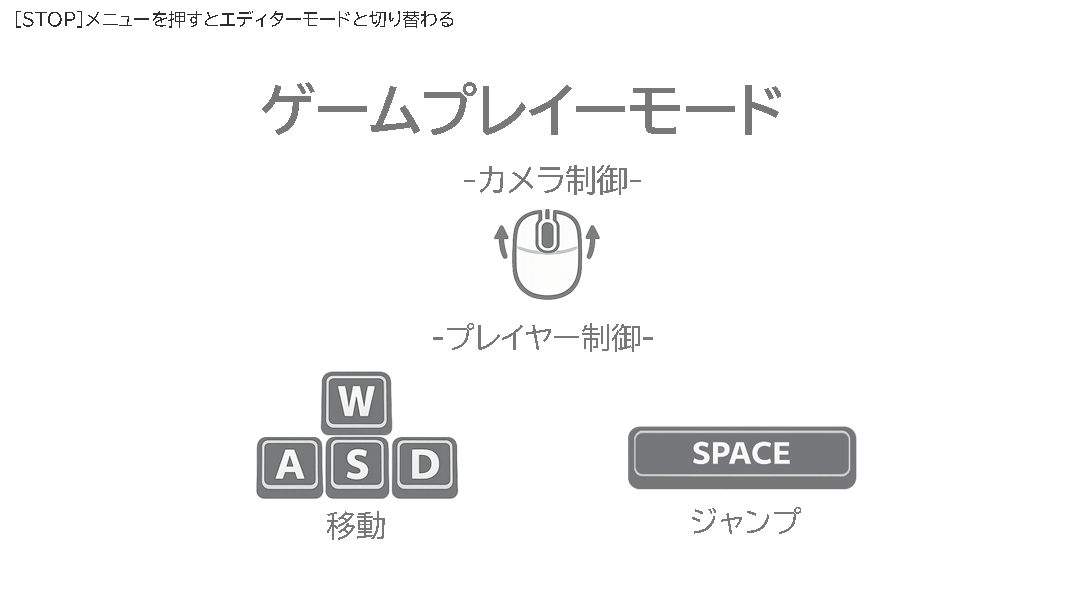
<style>
.page{position:relative;width:1066px;height:600px;background:#ffffff}
.page>*{position:absolute;margin:0}
.t1{font:18.2px "BIZ-UDPGothic";color:#2d2d2d}
.t2{font:57.3px "BIZ-UDPGothic-Bold";color:#787878}
.t3{font:30.3px "BIZ-UDPGothic";color:#787878}
</style>
<div class="page">
<p class="t1" style="left:16px;top:11px;width:437px;height:17px">[STOP]メニューを押すとエディターモードと切り替わる</p>
<p class="t2" style="left:262px;top:82px;width:519px;height:53px">ゲームプレイーモード</p>
<p class="t3" style="left:464px;top:165px;width:177px;height:30px">-カメラ制御-</p>
<p class="t3" style="left:433px;top:323px;width:220px;height:29px">-プレイヤー制御-</p>
<p class="t3" style="left:692px;top:507px;width:109px;height:27px">ジャンプ</p>
<p class="t3" style="left:327px;top:511px;width:58px;height:29px">移動</p>
</div>
